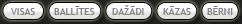
<style>
.page{position:relative;width:242px;height:24px}
.page>*{position:absolute;margin:0}
.t1{font:10px "TrebuchetMS";color:#7f7f7f}
</style>
<div class="page">
<p class="t1" style="left:54px;top:6px;width:41px;height:9px">BALLĪTES</p>
<p class="t1" style="left:112px;top:5px;width:32px;height:10px">DAŽĀDI</p>
<p class="t1" style="left:163px;top:6px;width:28px;height:9px">KĀZAS</p>
<p class="t1" style="left:207px;top:6px;width:26px;height:9px">BĒRNI</p>
<p class="t1" style="left:11px;top:8px;width:24px;height:7px">VISAS</p>
</div>
